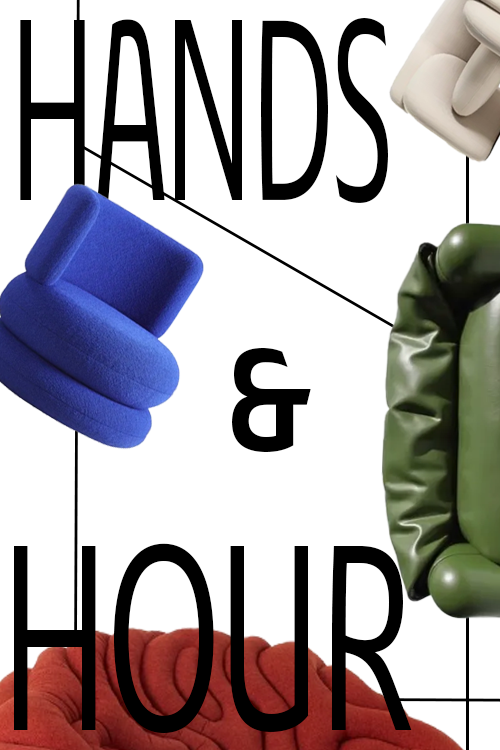
<style>
.page{position:relative;width:500px;height:750px;background:#ffffff}
.page>*{position:absolute;margin:0}
.t1{font:268px "Chypre-ConReg";color:#000000;scale:0.56 1}
.t2{font:150px "Chypre-ConBol";color:#000000}
.t3{font:274px "Chypre-ConReg";color:#000000;scale:0.69 1}
</style>
<div class="page">
<p class="t1" style="left:20px;top:18px;width:368px;height:185px">HANDS</p>
<p class="t2" style="left:232px;top:348px;width:79px;height:104px">&amp;</p>
<p class="t3" style="left:14px;top:543px;width:398px;height:190px">HOUR</p>
</div>
